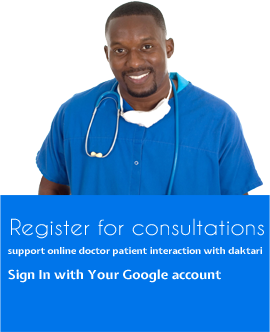
<style>
.page{position:relative;width:270px;height:332px;background:#0075ea}
.page>*{position:absolute;margin:0}
.t1{font:20.8px "CaviarDreams";color:#ffffff;scale:1.08 1}
.t2{font:9.2px/25px "ExpletusSans-Bold";color:#ffffff;scale:1.08 1}
.t3{font:12.5px/25px "ExpletusSans-Bold";color:#ffffff;scale:1.08 1}
</style>
<div class="page">
<p class="t1" style="left:11px;top:218px;width:253px;height:21px">Register for consultations</p>
<p class="t2" style="left:8px;top:247px;width:254px;height:36px">support online doctor patient interaction with daktari<br><span class="t3">Sign In with Your Google account</span></p>
</div>
